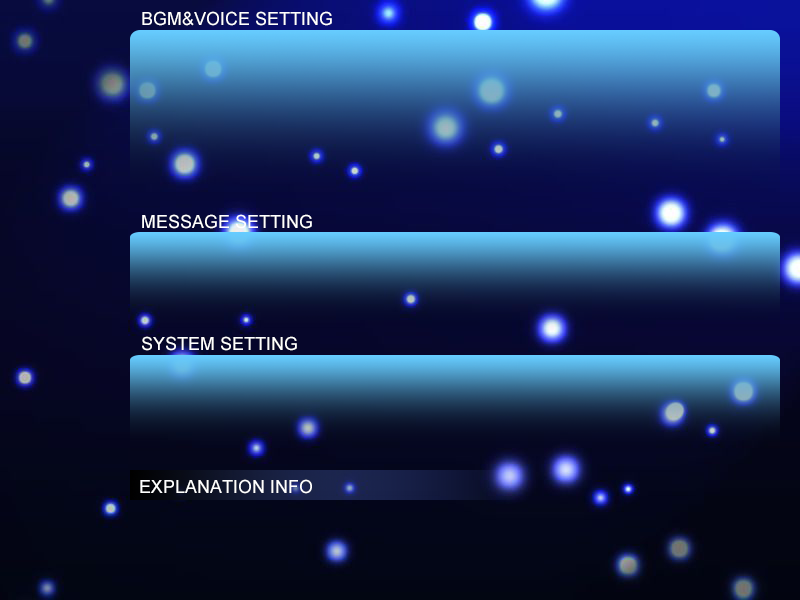
<style>
.page{position:relative;width:800px;height:600px}
.page>*{position:absolute;margin:0}
.t1{font:18px "ArialMT";color:#ffffff}
</style>
<div class="page">
<p class="t1" style="left:142px;top:11px;width:190px;height:15px">BGM&amp;VOICE SETTING</p>
<p class="t1" style="left:142px;top:214px;width:170px;height:15px">MESSAGE SETTING</p>
<p class="t1" style="left:142px;top:336px;width:155px;height:15px">SYSTEM SETTING</p>
<p class="t1" style="left:140px;top:479px;width:172px;height:15px">EXPLANATION INFO</p>
</div>
